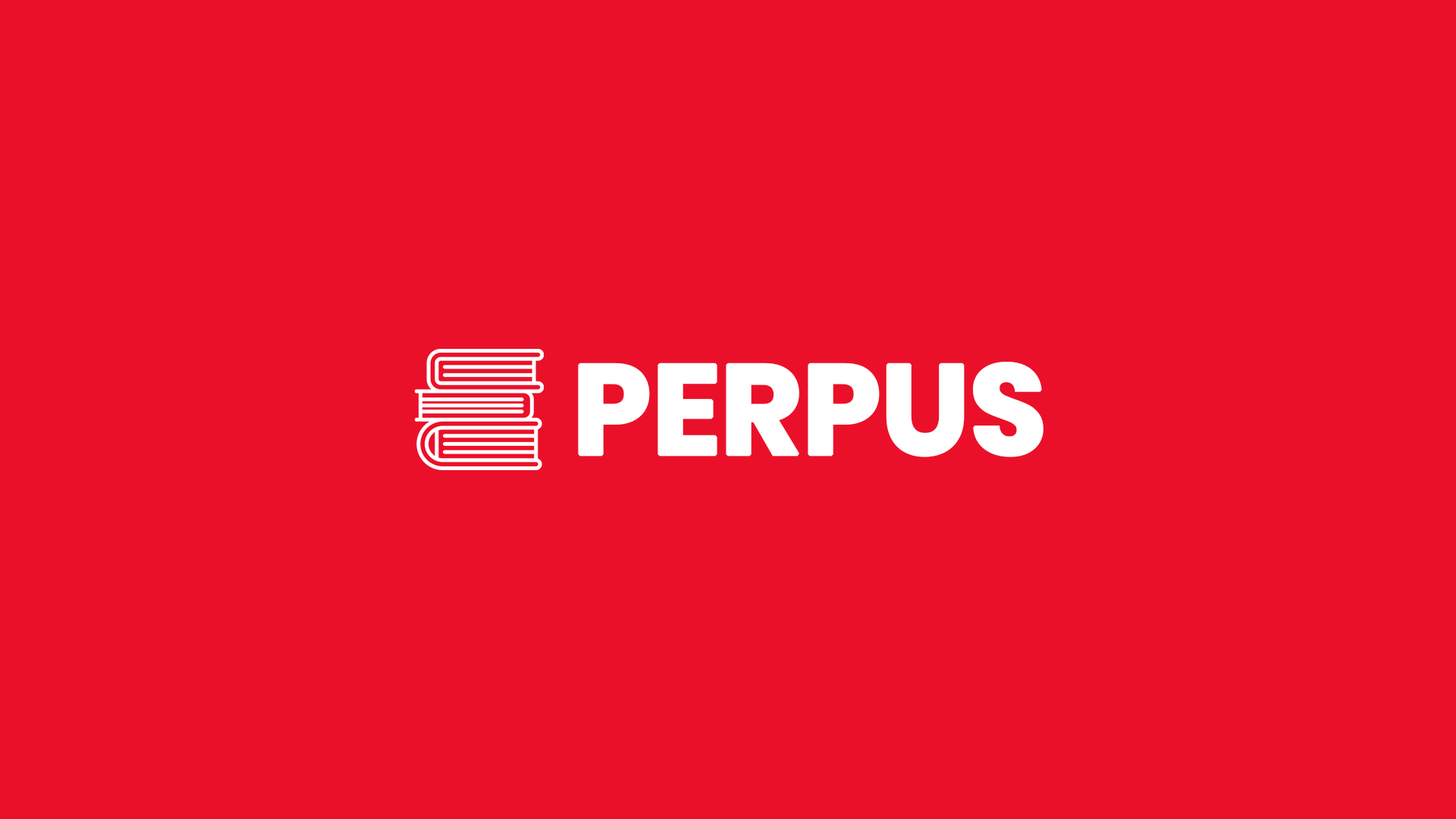
<style>
.page{position:relative;width:1456px;height:819px;background:#eb1029}
.page>*{position:absolute;margin:0}
.t1{font:126.4px "Poppins-Bold";letter-spacing:-0.02em;color:#ffffff;font-weight:bold}
</style>
<div class="page">
<p class="t1" style="left:578px;top:362px;width:465px;height:95px">PERPUS</p>
</div>
